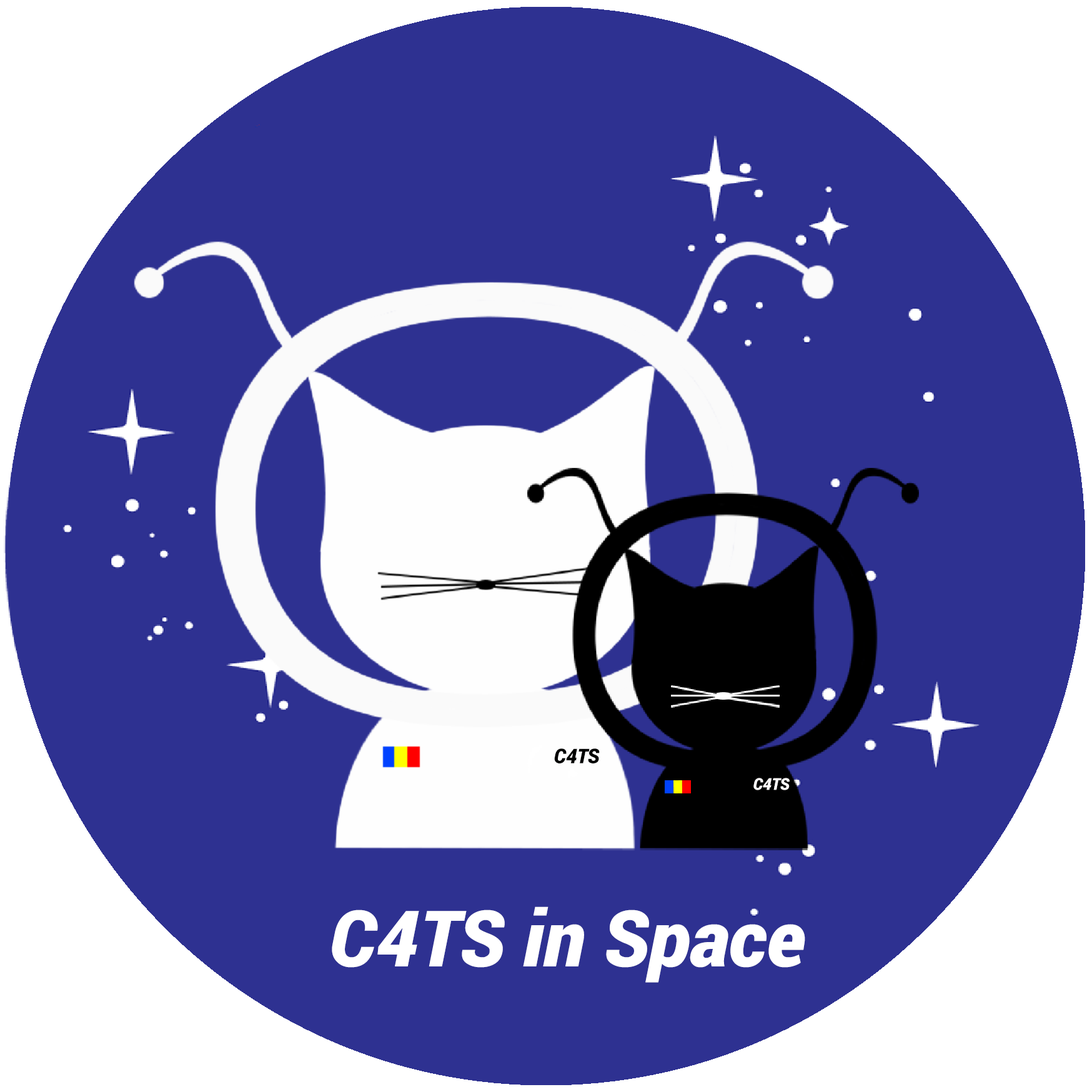
<style>
.page{position:relative;width:1092px;height:1092px;background:#2e3191}
.page>*{position:absolute;margin:0}
.t1{font:20.3px "Roboto-BlackItalic";color:#000100}
.t2{font:16.2px "Roboto-BlackItalic";color:#fefafa}
.t3{font:78.1px "Roboto-BlackItalic";color:#ffffff}
</style>
<div class="page">
<p class="t1" style="left:554px;top:748px;width:46px;height:15px">C4TS</p>
<p class="t2" style="left:753px;top:778px;width:37px;height:12px">C4TS</p>
<p class="t3" style="left:332px;top:906px;width:473px;height:77px">C4TS in Space</p>
</div>
